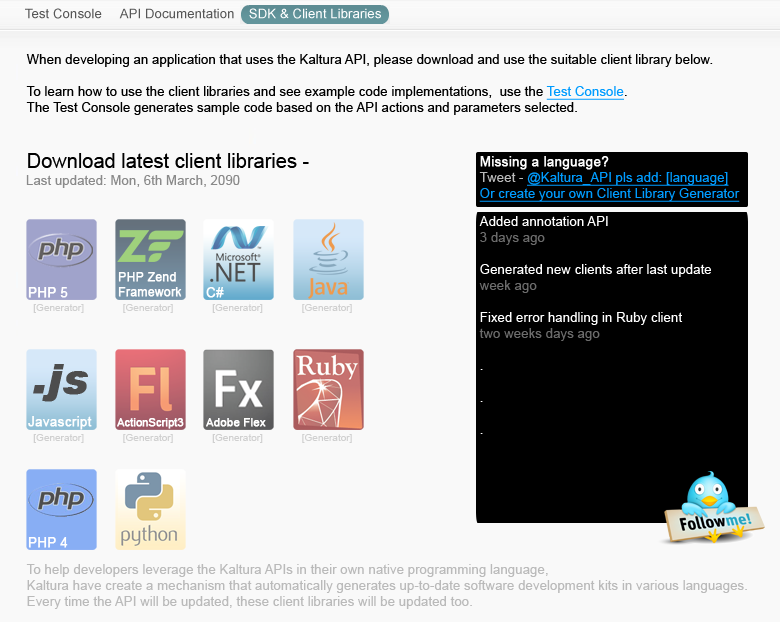
<style>
.page{position:relative;width:780px;height:622px;background:#f9f9f9}
.page>*{position:absolute;margin:0}
.t1{font:13.3px "ArialMT";color:#565656}
.t2{font:13.3px "ArialMT";color:#ffffff}
.t3{font:13.3px "ArialMT";color:#000000}
.t4{font:13.3px "ArialMT";color:#009cff;text-decoration:underline}
.t5{font:20px "ArialMT";color:#000000}
.t6{font:13.3px "ArialMT";color:#ffffff;font-weight:bold}
.t7{font:13.3px "ArialMT";color:#bababa}
.t8{font:13.3px "ArialMT";color:#8a8a8a}
.t9{font:13.3px "ArialMT";color:#6c6c6c}
.t10{font:12.2px "ArialMT";color:#ffffff;font-weight:bold}
.t11{font:10px "ArialMT";color:#bbbbbb}
.t12{font:41.4px "Arial-BlackItalic";color:#4d4d4d;font-weight:bold}
.t13{font:10.7px "ArialMT";color:#ffffff;font-weight:bold}
.t14{font:11.2px "ArialMT";color:#ffffff;font-weight:bold}
</style>
<div class="page">
<p class="t1" style="left:25px;top:8px;width:77px;height:11px">Test Console</p>
<p class="t1" style="left:119px;top:8px;width:115px;height:11px">API Documentation</p>
<p class="t2" style="left:249px;top:8px;width:132px;height:11px">SDK &amp; Client Libraries</p>
<p class="t3" style="left:26px;top:54px;width:687px;height:114px">When developing an application that uses the Kaltura API, please download and use the suitable client library below.<br><br>To learn how to use the client libraries and see example code implementations,  use the <span class="t4">Test Console</span>.<br>The Test Console generates sample code based on the API actions and parameters selected.<br><br><br><span class="t5">Download latest client libraries -</span></p>
<p class="t4" style="left:479px;top:156px;width:261px;height:46px"><span class="t6">Missing a language?<br></span><span class="t7">Tweet - </span>@Kaltura_API pls add: [language]<br>Or create your own Client Library Generator</p>
<p class="t8" style="left:26px;top:175px;width:214px;height:13px">Last updated: Mon, 6th March, 2090</p>
<p class="t2" style="left:479px;top:216px;width:232px;height:218px">Added annotation API<br><span class="t9">3 days ago<br><br></span>Generated new clients after last update<br><span class="t9">week ago<br><br></span>Fixed error handling in Ruby client<br><span class="t9">two weeks days ago<br><br></span>.<br><br>.<br><br>.</p>
<p class="t10" style="left:118px;top:272px;width:64px;height:25px">PHP Zend <br>Framework</p>
<p class="t6" style="left:28px;top:287px;width:40px;height:11px">PHP 5</p>
<p class="t6" style="left:206px;top:287px;width:18px;height:11px">C#</p>
<p class="t11" style="left:33px;top:304px;width:319px;height:9px">[Generator]              [Generator]              [Generator]              [Generator]</p>
<p class="t12" style="left:33px;top:364px;width:55px;height:38px">.js</p>
<p class="t6" style="left:28px;top:416px;width:64px;height:14px">Javascript</p>
<p class="t13" style="left:117px;top:418px;width:67px;height:11px">ActionScript3</p>
<p class="t14" style="left:206px;top:418px;width:60px;height:9px">Adobe Flex</p>
<p class="t11" style="left:33px;top:434px;width:319px;height:9px">[Generator]              [Generator]              [Generator]              [Generator]</p>
<p class="t6" style="left:28px;top:537px;width:40px;height:11px">PHP 4</p>
<p class="t7" style="left:26px;top:564px;width:721px;height:45px">To help developers leverage the Kaltura APIs in their own native programming language, <br>Kaltura have create a mechanism that automatically generates up-to-date software development kits in various languages. <br>Every time the API will be updated, these client libraries will be updated too.</p>
</div>
